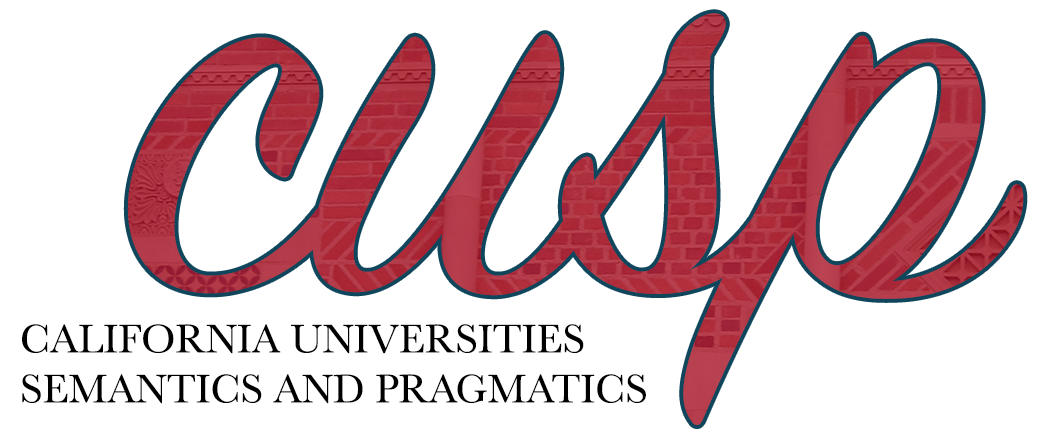
<style>
.page{position:relative;width:1050px;height:438px;background:#ffffff}
.page>*{position:absolute;margin:0}
.t1{font:41.7px "Baskerville";color:#000000}
</style>
<div class="page">
<p class="t1" style="left:22px;top:324px;width:624px;height:80px">CALIFORNIA UNIVERSITIES SEMANTICS AND PRAGMATICS</p>
</div>
